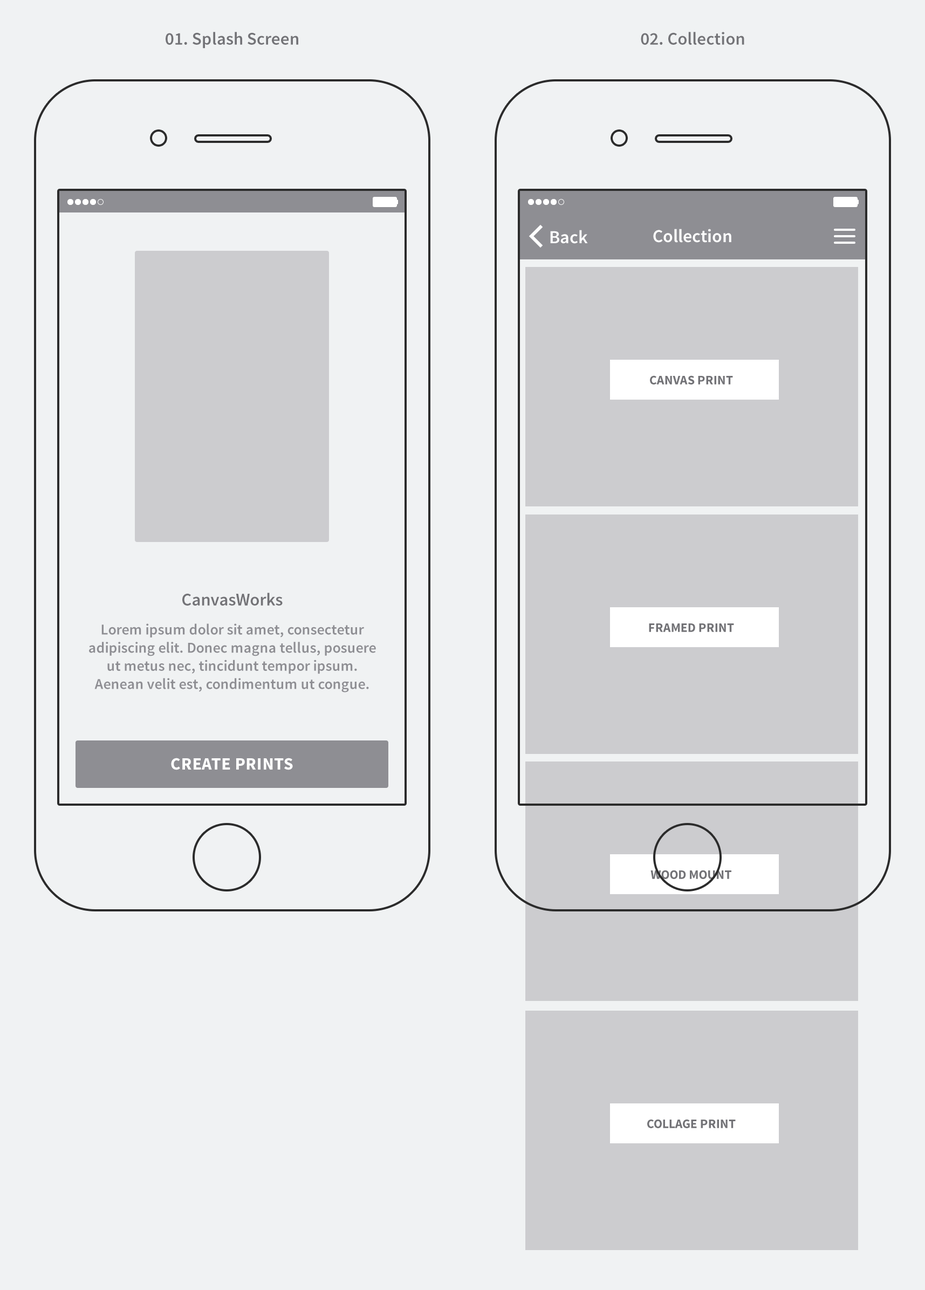
<style>
.page{position:relative;width:925px;height:1290px;background:#f0f2f3}
.page>*{position:absolute;margin:0}
.t1{font:17.8px "SourceSansPro-Semibold";color:#737377}
.t2{font:18.3px "SourceSansPro-Semibold";color:#ffffff}
.t3{font:12.9px "SourceSansPro-Bold";color:#737377}
.t4{font:15.1px "SourceSansPro-Semibold";color:#8e8e93}
.t5{font:17.3px "SourceSansPro-Bold";letter-spacing:0.02em;color:#ffffff;text-transform:uppercase}
</style>
<div class="page">
<p class="t1" style="left:166px;top:32px;width:132px;height:17px">01. Splash Screen</p>
<p class="t1" style="left:641px;top:32px;width:103px;height:13px">02. Collection</p>
<p class="t2" style="left:550px;top:230px;width:38px;height:14px">Back</p>
<p class="t2" style="left:653px;top:229px;width:78px;height:14px">Collection</p>
<p class="t3" style="left:650px;top:375px;width:83px;height:9px">CANVAS PRINT</p>
<p class="t1" style="left:182px;top:593px;width:101px;height:12px">CanvasWorks</p>
<p class="t4" style="left:89px;top:623px;width:287px;height:69px;text-align:center">Lorem ipsum dolor sit amet, consectetur adipiscing elit. Donec magna tellus, posuere ut metus nec, tincidunt tempor ipsum. Aenean velit est, condimentum ut congue.</p>
<p class="t3" style="left:649px;top:623px;width:85px;height:9px">FRAMED PRINT</p>
<p class="t5" style="left:171px;top:757px;width:122px;height:13px">CREATE PRINTS</p>
<p class="t3" style="left:650px;top:870px;width:81px;height:9px">WOOD MOUNT</p>
<p class="t3" style="left:647px;top:1119px;width:88px;height:9px">COLLAGE PRINT</p>
</div>
